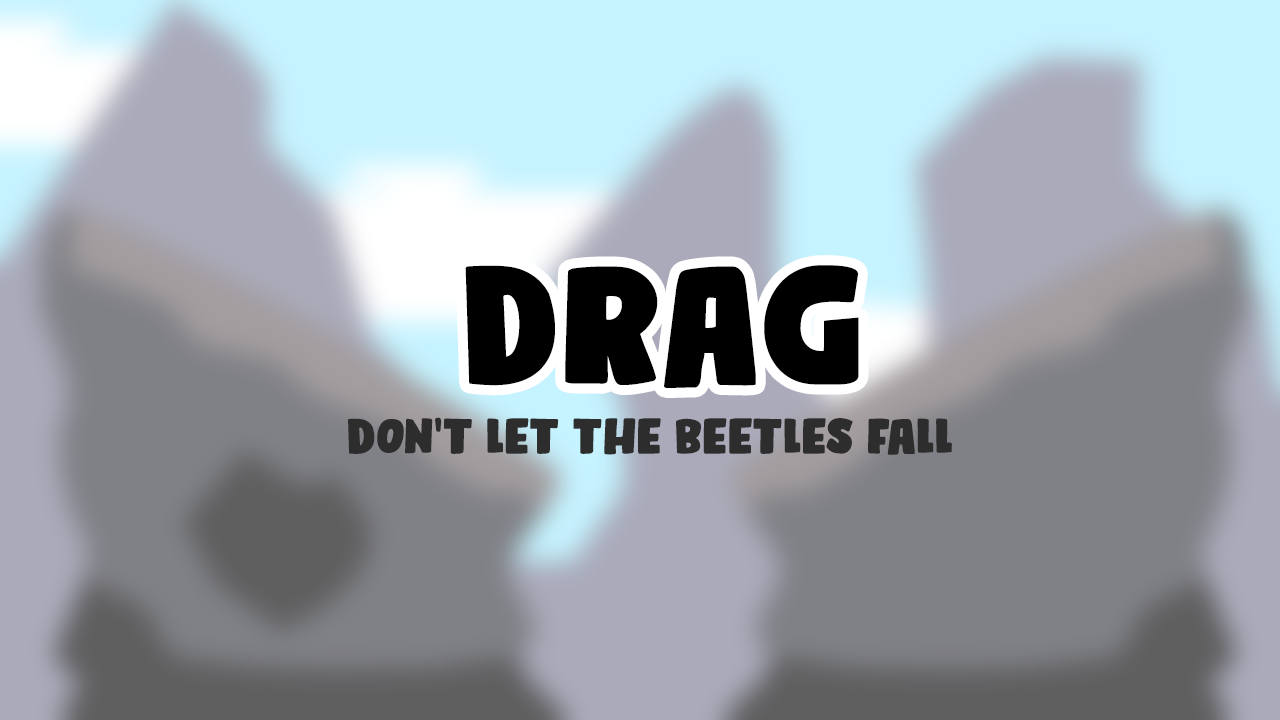
<style>
.page{position:relative;width:1280px;height:720px}
.page>*{position:absolute;margin:0}
.t1{font:170.9px "BumperStickerDEMO-Regular";color:#000000}
.t2{font:50px "BumperStickerDEMO-Regular";color:#2d2d2d}
</style>
<div class="page">
<p class="t1" style="left:465px;top:265px;width:394px;height:123px">DRAG</p>
<p class="t2" style="left:348px;top:417px;width:604px;height:38px">DON'T LET THE BEETLES FALL</p>
</div>
